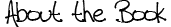
<style>
.page{position:relative;width:171px;height:27px;background:#ffffff}
.page>*{position:absolute;margin:0}
.t1{font:36px "TallPaul";color:#000000}
</style>
<div class="page">
<p class="t1" style="left:5px;top:0px;width:162px;height:28px">About the Book</p>
</div>
